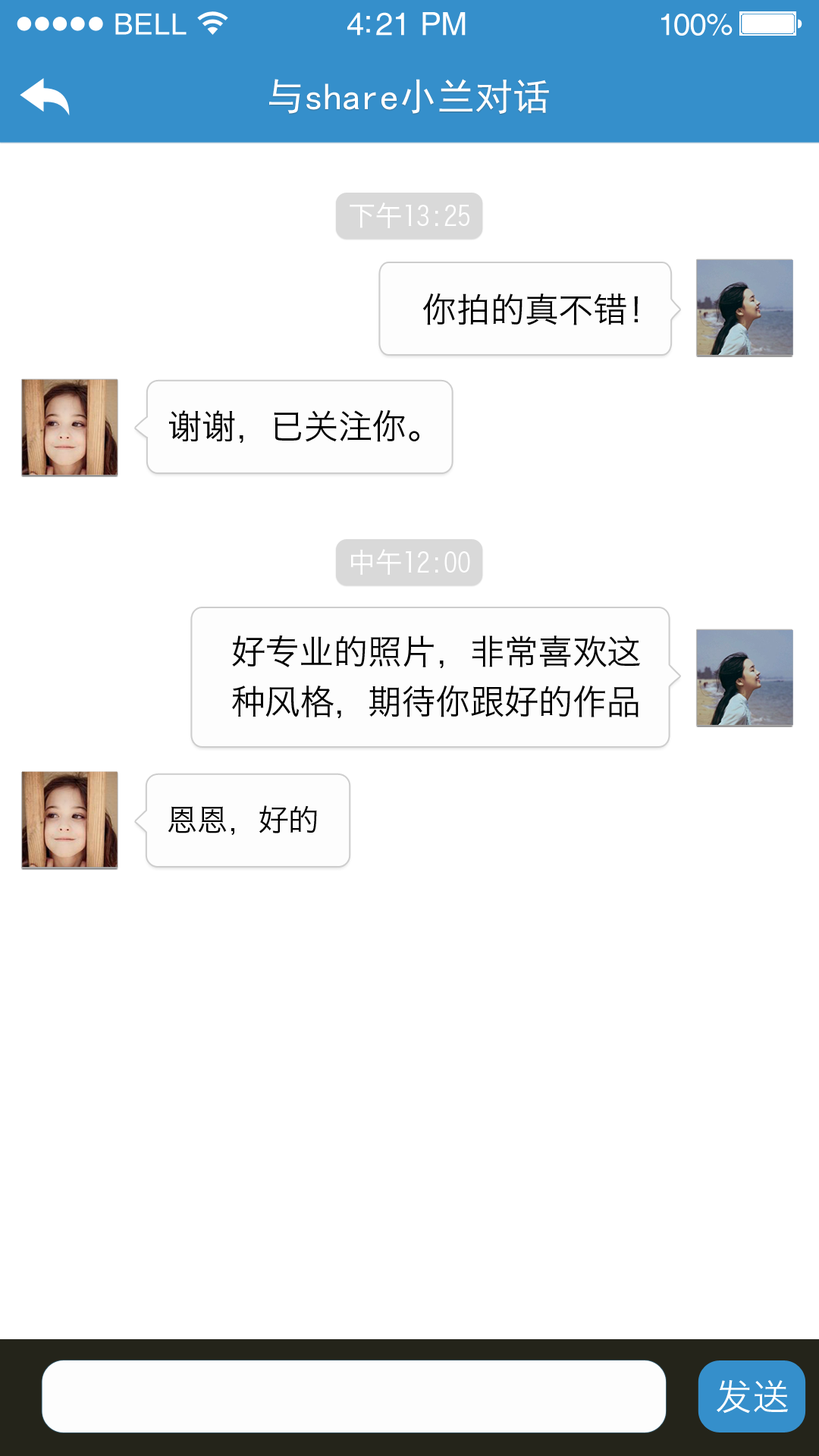
<style>
.page{position:relative;width:819px;height:1456px;background:#ffffff}
.page>*{position:absolute;margin:0}
.t1{font:29.3px "Helvetica";letter-spacing:0.02em;color:#ffffff}
.t2{font:31.8px "Helvetica";letter-spacing:-0.02em;color:#ffffff}
.t3{font:30.6px "Helvetica";letter-spacing:-0.02em;color:#ffffff}
.t4{font:37.9px "SimHei";color:#ffffff}
.t5{font:27.3px "HiraginoSansGB-W3";color:#ffffff}
.t6{font:34.1px "HiraginoSansGB-W3";color:#000000}
.t7{font:34.1px/50px "HiraginoSansGB-W3";color:#000000}
.t8{font:30.3px "HiraginoSansGB-W3";color:#000000}
.t9{font:36.4px "HiraginoSansGB-W3";letter-spacing:0.05em;color:#ffffff}
</style>
<div class="page">
<p class="t1" style="left:115px;top:13px;width:72px;height:22px">BELL</p>
<p class="t2" style="left:347px;top:12px;width:119px;height:24px">4:21 PM</p>
<p class="t3" style="left:661px;top:14px;width:72px;height:22px">100%</p>
<p class="t4" style="left:269px;top:79px;width:280px;height:35px">与share小兰对话</p>
<p class="t5" style="left:350px;top:202px;width:119px;height:26px">下午13:25</p>
<p class="t6" style="left:422px;top:293px;width:216px;height:32px">你拍的真不错！</p>
<p class="t6" style="left:169px;top:409px;width:250px;height:35px">谢谢，已关注你。</p>
<p class="t5" style="left:350px;top:549px;width:120px;height:26px">中午12:00</p>
<p class="t7" style="left:232px;top:635px;width:408px;height:84px">好专业的照片，非常喜欢这<br>种风格，期待你跟好的作品</p>
<p class="t8" style="left:168px;top:805px;width:149px;height:30px">恩恩，好的</p>
<p class="t9" style="left:717px;top:1380px;width:71px;height:34px">发送</p>
</div>
